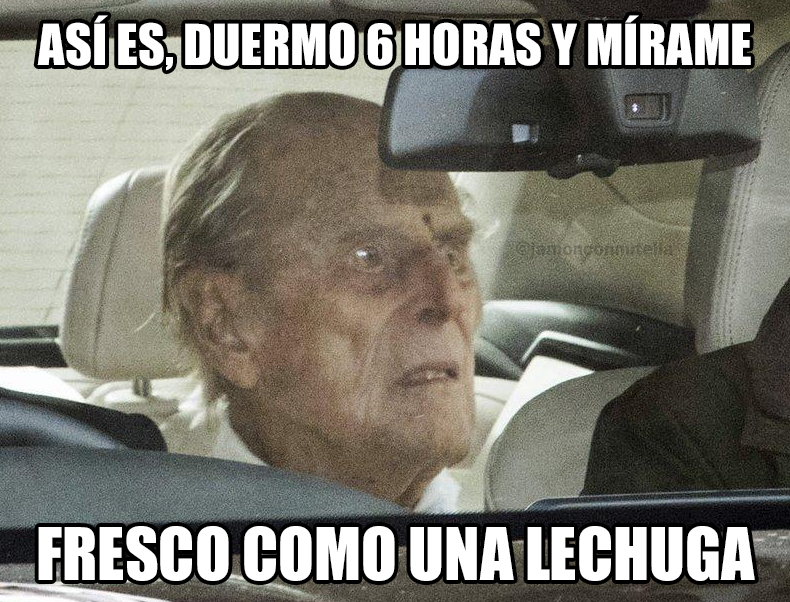
<style>
.page{position:relative;width:790px;height:602px}
.page>*{position:absolute;margin:0}
.t1{font:52.3px "Impact";color:#ffffff}
.t2{font:19.5px "FranklinGothic-Demi";color:#636351}
.t3{font:67px "Impact";color:#ffffff}
</style>
<div class="page">
<p class="t1" style="left:37px;top:15px;width:714px;height:56px">ASÍ ES, DUERMO 6 HORAS Y MÍRAME</p>
<p class="t2" style="left:516px;top:241px;width:157px;height:18px">@jamonconnutella</p>
<p class="t3" style="left:38px;top:526px;width:717px;height:55px">FRESCO COMO UNA LECHUGA</p>
</div>
